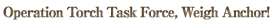
<style>
.page{position:relative;width:271px;height:26px;background:#ffffff}
.page>*{position:absolute;margin:0}
.t1{font:14px "RyuminPro-ExBold";letter-spacing:-0.08em;color:#6c573f;font-weight:bold}
</style>
<div class="page">
<p class="t1" style="left:3px;top:6px;width:267px;height:14px">Operation Torch Task Force, Weigh Anchor!</p>
</div>
